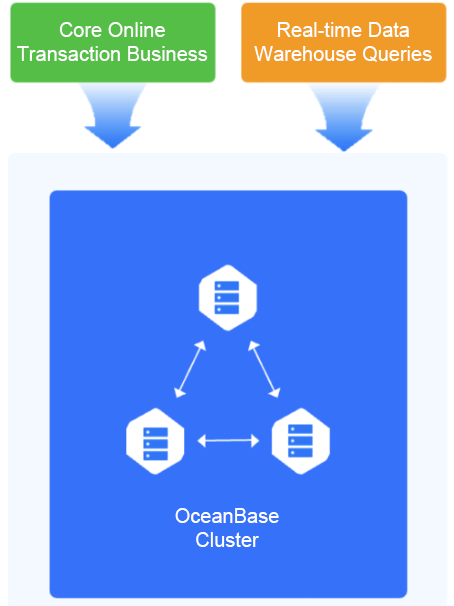
<style>
.page{position:relative;width:454px;height:606px;background:#3571f9}
.page>*{position:absolute;margin:0}
.t1{font:20px/24px "ArialMT";color:#ffffff}
</style>
<div class="page">
<p class="t1" style="left:17px;top:22px;width:191px;height:39px;text-align:center">Core Online Transaction Business</p>
<p class="t1" style="left:254px;top:22px;width:178px;height:40px;text-align:center">Real-time Data Warehouse Queries</p>
<p class="t1" style="left:175px;top:508px;width:104px;height:39px;text-align:center">OceanBase Cluster</p>
</div>
